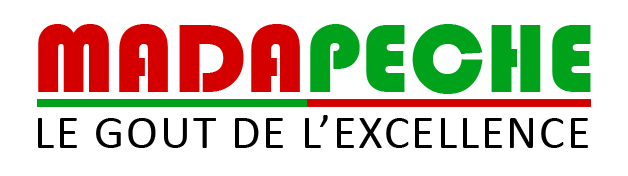
<style>
.page{position:relative;width:628px;height:176px;background:#ffffff}
.page>*{position:absolute;margin:0}
.t1{font:100px "Bauhaus93";color:#00a21b}
.t2{font:100px "Bauhaus93";color:#d40000}
.t3{font:48px "Calibri";letter-spacing:0.04em;color:#000000}
</style>
<div class="page">
<p class="t1" style="left:38px;top:24px;width:553px;height:70px"><span class="t2">MADA</span>PECHE</p>
<p class="t3" style="left:38px;top:115px;width:550px;height:33px">LE GOUT DE L’EXCELLENCE</p>
</div>
